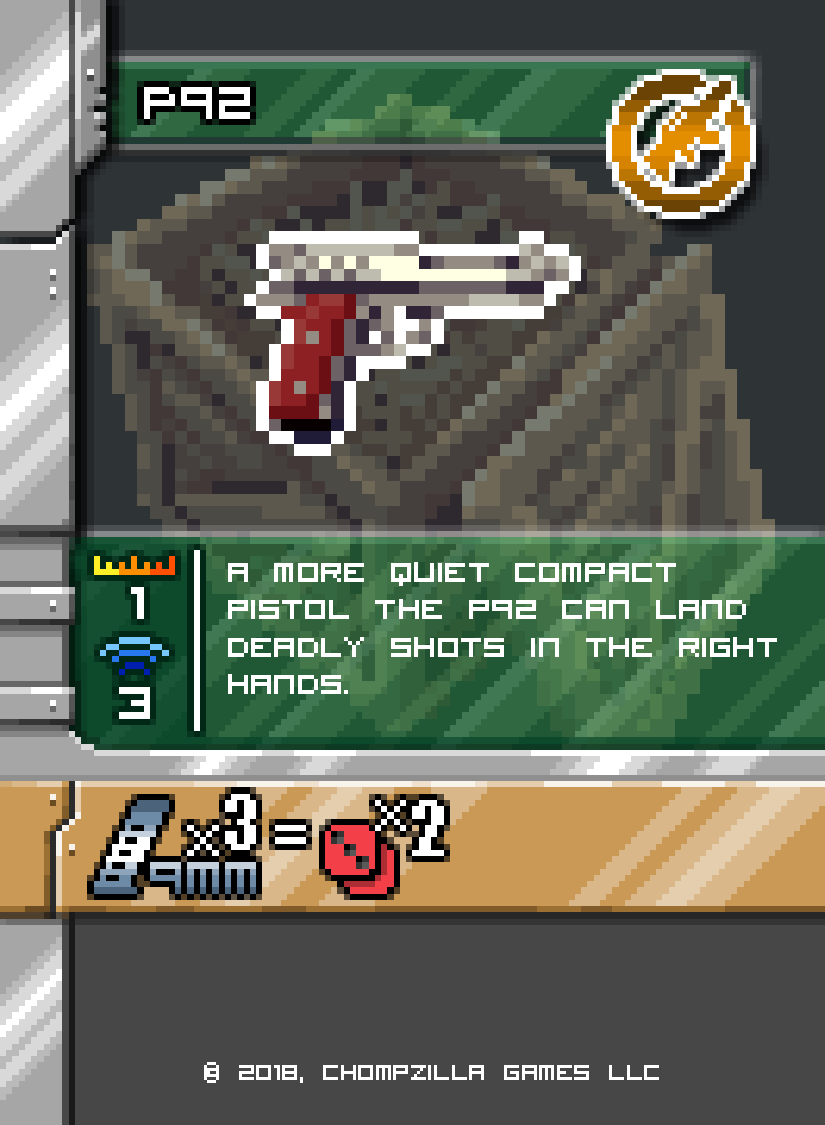
<style>
.page{position:relative;width:825px;height:1125px}
.page>*{position:absolute;margin:0}
.t1{font:50px/37.5px "VisitorTT2BRK";color:#ffffff}
.t2{font:37.5px "VisitorTT2BRK";color:#ffffff}
</style>
<div class="page">
<p class="t1" style="left:228px;top:562px;width:549px;height:132px">A more quiet compact <br>pistol the p92 can land<br>deadly shots in the right<br>hands.</p>
<p class="t2" style="left:204px;top:1062px;width:455px;height:21px">© 2018, Chompzilla Games LLC</p>
</div>
